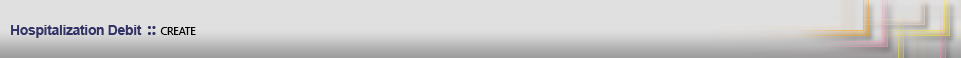
<style>
.page{position:relative;width:961px;height:58px;background:#e1e0e0}
.page>*{position:absolute;margin:0}
.t1{font:14px "Arial-BoldMT";letter-spacing:-0.025em;color:#333366}
.t2{font:18px "SegoeUI-Bold";letter-spacing:-0.025em;color:#333366}
.t3{font:11px "SegoeUI";letter-spacing:-0.025em;color:#010101}
</style>
<div class="page">
<p class="t1" style="left:11px;top:25px;width:185px;height:13px">Hospitalization Debit <span class="t2">:: </span><span class="t3">CREATE</span></p>
</div>
